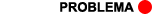
<style>
.page{position:relative;width:154px;height:15px;background:#ffffff}
.page>*{position:absolute;margin:0}
.t1{font:13px "Arial-BoldMT";color:#000000}
</style>
<div class="page">
<p class="t1" style="left:60px;top:2px;width:74px;height:10px">PROBLEMA</p>
</div>
